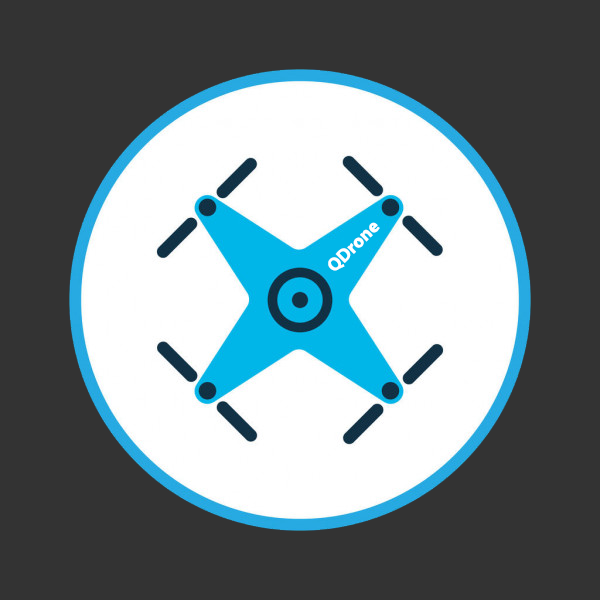
<style>
.page{position:relative;width:600px;height:600px;background:#333333}
.page>*{position:absolute;margin:0}
.t1{font:18.7px "MyriadPro-Bold";color:#ffffff}
</style>
<div class="page">
<p class="t1" style="left:328px;top:222px;width:52px;height:49px;rotate:-45deg">QDrone</p>
</div>
